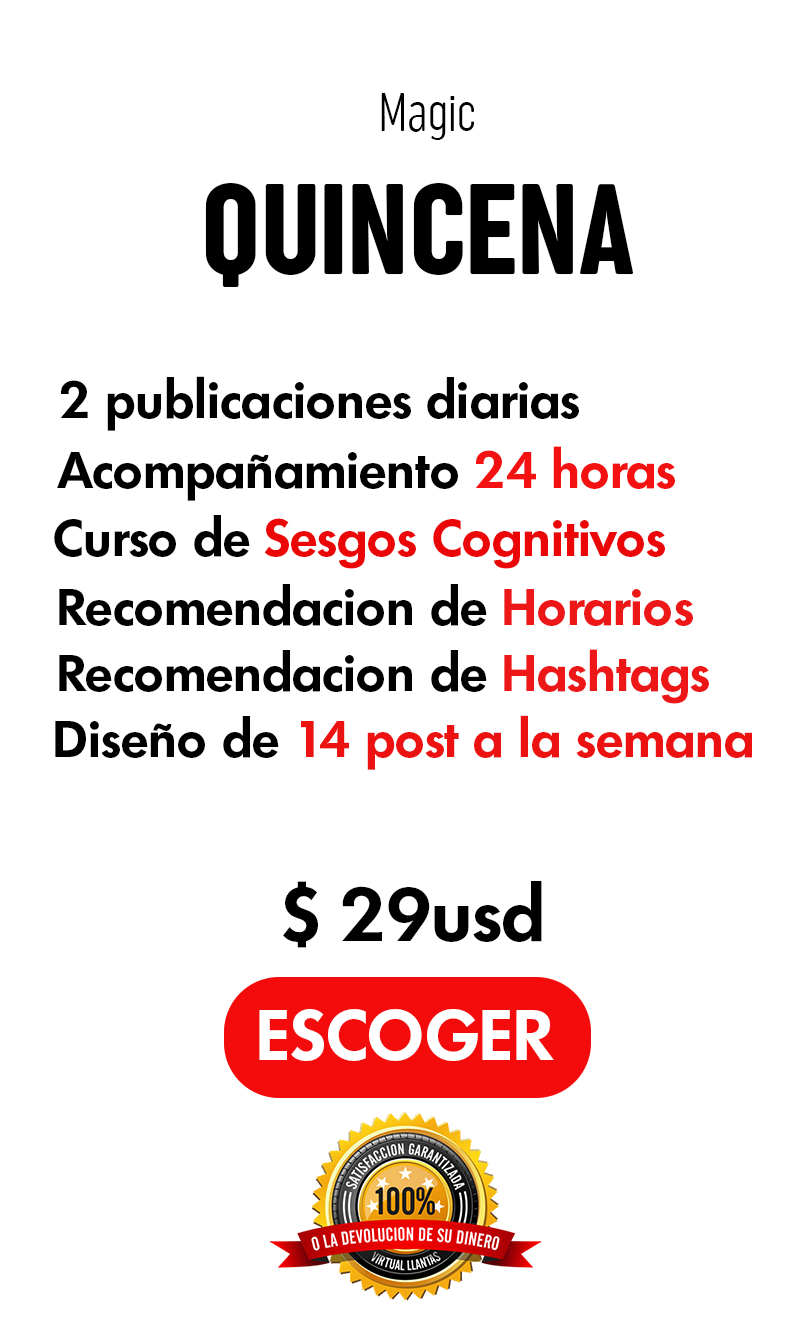
<style>
.page{position:relative;width:788px;height:1328px;background:#ffffff}
.page>*{position:absolute;margin:0}
.t1{font:55.6px "SugoProClassicTrial-ExtraLight";letter-spacing:0.004em;color:#000000}
.t2{font:133.2px "SugoProClassicTrial-Regular";letter-spacing:0.004em;color:#000000}
.t3{font:50.6px "Limerick-DemiBold";letter-spacing:0.004em;color:#000000}
.t4{font:50.6px "Limerick-DemiBold";letter-spacing:0.004em;color:#f41111}
.t5{font:50.6px "Limerick-DemiBold";letter-spacing:0.004em;color:#eb0707}
.t6{font:50.6px "Limerick-DemiBold";letter-spacing:0.004em;color:#ee1717}
.t7{font:50.6px "Limerick-DemiBold";letter-spacing:0.004em;color:#ec1212}
.t8{font:73.2px "Limerick-DemiBold";letter-spacing:0.004em;color:#000000}
.t9{font:69.4px "Limerick-DemiBold";letter-spacing:0.004em;color:#ffffff}
</style>
<div class="page">
<p class="t1" style="left:381px;top:93px;width:93px;height:47px">Magic</p>
<p class="t2" style="left:205px;top:183px;width:429px;height:104px">QUINCENA</p>
<p class="t3" style="left:60px;top:376px;width:519px;height:55px">2 publicaciones diarias</p>
<p class="t3" style="left:57px;top:446px;width:618px;height:55px">Acompañamiento <span class="t4">24 horas</span></p>
<p class="t5" style="left:54px;top:515px;width:611px;height:54px"><span class="t3">Curso de </span>Sesgos Cognitivos</p>
<p class="t3" style="left:59px;top:584px;width:634px;height:42px">Recomendacion de <span class="t6">Horarios</span></p>
<p class="t3" style="left:59px;top:649px;width:650px;height:55px">Recomendacion de <span class="t6">Hashtags</span></p>
<p class="t7" style="left:55px;top:715px;width:697px;height:55px"><span class="t3">Diseño de </span>14 post a la semana</p>
<p class="t8" style="left:283px;top:881px;width:259px;height:67px">$ 29usd</p>
<p class="t9" style="left:259px;top:1009px;width:295px;height:52px">ESCOGER</p>
</div>
